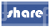
<style>
.page{position:relative;width:50px;height:28px}
.page>*{position:absolute;margin:0}
.t1{font:15.2px "Bauhaus93";color:#ffffff}
</style>
<div class="page">
<p class="t1" style="left:7px;top:7px;width:36px;height:11px">share</p>
</div>
